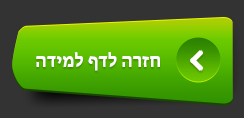
<style>
.page{position:relative;width:244px;height:118px;background:#333333}
.page>*{position:absolute;margin:0}
.t1{font:19px "MyriadHebrew-Bold";color:#ffffff}
</style>
<div class="page">
<p class="t1" style="left:36px;top:52px;width:124px;height:19px">הדימל ףדל הרזח</p>
</div>
